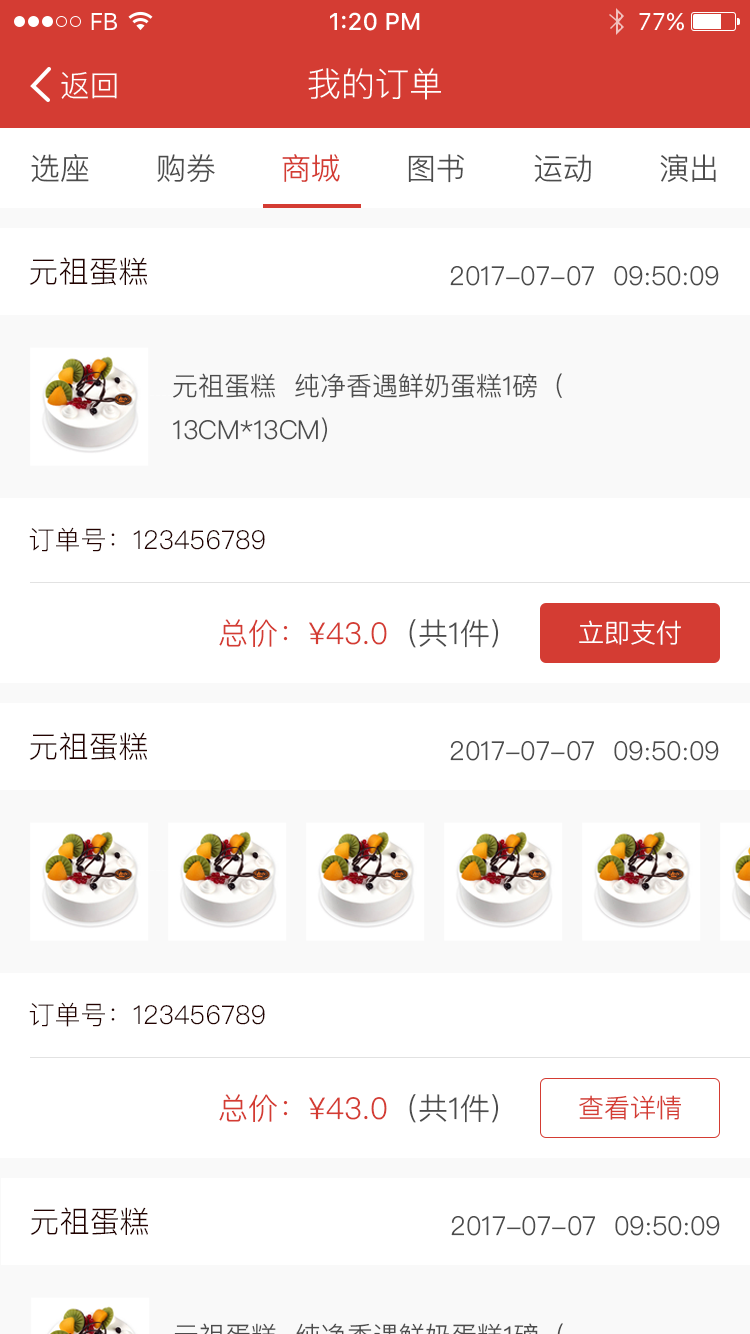
<style>
.page{position:relative;width:750px;height:1334px;background:#ffffff}
.page>*{position:absolute;margin:0}
.t1{font:24px "SFUIText-Regular";letter-spacing:-0.025em;color:#ffffff}
.t2{font:24px "SFUIText-Medium";color:#ffffff}
.t3{font:24px "SFUIText-Regular";color:#ffffff}
.t4{font:30px "PingFang-SC-Regular";color:#ffffff}
.t5{font:34px "PingFang-SC-Regular";color:#fefefe}
.t6{font:30px "PingFangSC-Light";color:#4c4c4c}
.t7{font:30px "PingFangSC-Light";color:#d43c33}
.t8{font:30px "PingFangSC-Light";color:#240200}
.t9{font:26px "PingFangSC-Light";color:#4c4c4c}
.t10{font:26px/44px "PingFangSC-Light";color:#4c4c4c}
.t11{font:26px "PingFangSC-Light";color:#240200}
.t12{font:26px "PingFangSC-Light";color:#ffffff}
.t13{font:26px "PingFangSC-Light";color:#d43c33}
</style>
<div class="page">
<p class="t1" style="left:91px;top:13px;width:26px;height:17px">FB</p>
<p class="t2" style="left:330px;top:12px;width:90px;height:19px">1:20 PM</p>
<p class="t3" style="left:639px;top:12px;width:45px;height:19px">77%</p>
<p class="t4" style="left:61px;top:72px;width:56px;height:27px">返回</p>
<p class="t5" style="left:308px;top:68px;width:133px;height:32px">我的订单</p>
<p class="t6" style="left:31px;top:154px;width:58px;height:28px">选座</p>
<p class="t6" style="left:157px;top:154px;width:58px;height:28px">购券</p>
<p class="t7" style="left:282px;top:154px;width:58px;height:28px">商城</p>
<p class="t6" style="left:408px;top:154px;width:56px;height:29px">图书</p>
<p class="t6" style="left:534px;top:154px;width:57px;height:28px">运动</p>
<p class="t6" style="left:660px;top:154px;width:56px;height:28px">演出</p>
<p class="t8" style="left:29px;top:257px;width:118px;height:29px">元祖蛋糕</p>
<p class="t9" style="left:450px;top:266px;width:269px;height:20px">2017-07-07  09:50:09</p>
<p class="t10" style="left:173px;top:373px;width:389px;height:69px">元祖蛋糕  纯净香遇鲜奶蛋糕1磅（<br>13CM*13CM)</p>
<p class="t11" style="left:29px;top:527px;width:236px;height:25px">订单号：123456789</p>
<p class="t7" style="left:219px;top:619px;width:280px;height:29px">总价：¥43.0<span class="t6">（共1件)</span></p>
<p class="t12" style="left:579px;top:620px;width:102px;height:25px">立即支付</p>
<p class="t8" style="left:29px;top:732px;width:118px;height:29px">元祖蛋糕</p>
<p class="t9" style="left:450px;top:741px;width:269px;height:20px">2017-07-07  09:50:09</p>
<p class="t11" style="left:29px;top:1002px;width:236px;height:25px">订单号：123456789</p>
<p class="t7" style="left:219px;top:1094px;width:280px;height:29px">总价：¥43.0<span class="t6">（共1件)</span></p>
<p class="t13" style="left:579px;top:1095px;width:102px;height:25px">查看详情</p>
<p class="t8" style="left:30px;top:1207px;width:118px;height:29px">元祖蛋糕</p>
<p class="t9" style="left:451px;top:1216px;width:269px;height:20px">2017-07-07  09:50:09</p>
</div>
